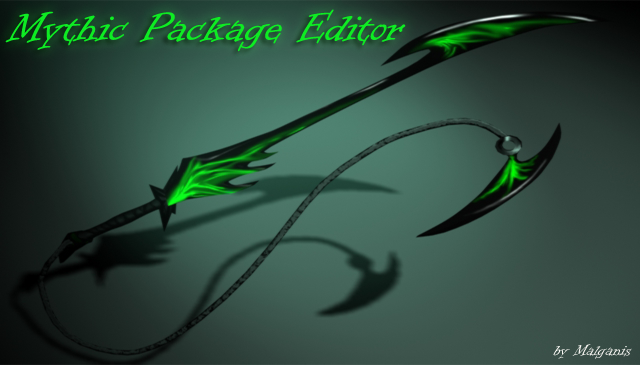
<style>
.page{position:relative;width:640px;height:365px}
.page>*{position:absolute;margin:0}
.t1{font:48px "InformalRoman-Regular";color:#0eec23}
.t2{font:18px "InformalRoman-Regular";color:#faf9f5}
</style>
<div class="page">
<p class="t1" style="left:5px;top:9px;width:401px;height:43px">Mythic Package Editor</p>
<p class="t2" style="left:553px;top:344px;width:79px;height:15px">by Malganis</p>
</div>
